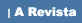
<style>
.page{position:relative;width:82px;height:23px;background:#4775a3}
.page>*{position:absolute;margin:0}
.t1{font:12px "Arial-Black";color:#ffffff}
.t2{font:10px "Arial-Black";color:#ffffff}
</style>
<div class="page">
<p class="t1" style="left:8px;top:7px;width:69px;height:11px"><span class="t2">  |</span> A Revista</p>
</div>
